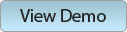
<style>
.page{position:relative;width:127px;height:32px}
.page>*{position:absolute;margin:0}
.t1{font:18px "MyriadPro-Regular";color:#222222}
</style>
<div class="page">
<p class="t1" style="left:20px;top:9px;width:86px;height:13px">View Demo</p>
</div>
